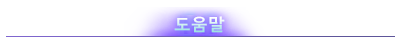
<style>
.page{position:relative;width:402px;height:37px;background:#ffffff}
.page>*{position:absolute;margin:0}
.t1{font:17px "MalgunGothicBold"}
</style>
<div class="page">
<p class="t1" style="left:174px;top:16px;width:51px;height:17px">도움말</p>
</div>
